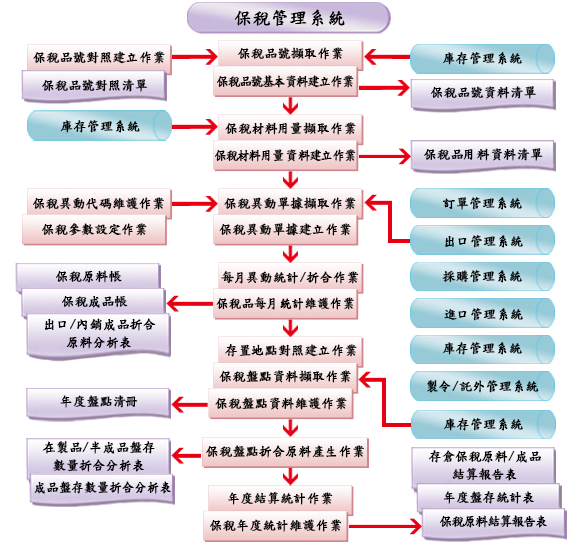
<style>
.page{position:relative;width:577px;height:545px;background:#ffffff}
.page>*{position:absolute;margin:0}
.t1{font:17.7px "DFKaiShu-SB-Estd-BF";color:#000000;font-weight:bold}
.t2{font:13px "DFKaiShu-SB-Estd-BF";color:#000000;font-weight:bold}
.t3{font:13px "DFKaiShu-SB-Estd-BF";letter-spacing:-0.1em;color:#000000;font-weight:bold;scale:0.95 1}
.t4{font:13px "DFKaiShu-SB-Estd-BF";letter-spacing:-0.15em;color:#000000;font-weight:bold}
.t5{font:13px "DFKaiShu-SB-Estd-BF";letter-spacing:0.03em;color:#000000;font-weight:bold}
.t6{font:13px "DFKaiShu-SB-Estd-BF";letter-spacing:0.01em;color:#000000;font-weight:bold;scale:0.95 1}
.t7{font:13px "DFKaiShu-SB-Estd-BF";letter-spacing:-0.17em;color:#000000;font-weight:bold;scale:0.95 1}
.t8{font:13px "DFKaiShu-SB-Estd-BF";letter-spacing:0.04em;color:#000000;font-weight:bold;scale:0.95 1}
.t9{font:13px "DFKaiShu-SB-Estd-BF";color:#000000;font-weight:bold;scale:0.95 1}
.t10{font:13px/18.1px "DFKaiShu-SB-Estd-BF";color:#000000;font-weight:bold}
.t11{font:13px "DFKaiShu-SB-Estd-BF";letter-spacing:-0.1em;color:#000000;font-weight:bold}
</style>
<div class="page">
<p class="t1" style="left:234px;top:9px;width:111px;height:17px">保稅管理系統</p>
<p class="t2" style="left:33px;top:51px;width:132px;height:13px">保稅品號對照建立作業</p>
<p class="t2" style="left:238px;top:47px;width:105px;height:13px">保稅品號擷取作業</p>
<p class="t2" style="left:442px;top:52px;width:80px;height:13px">庫存管理系統</p>
<p class="t3" style="left:217px;top:75px;width:137px;height:13px">保稅品號基本資料建立作業</p>
<p class="t2" style="left:42px;top:79px;width:106px;height:13px">保稅品號對照清單</p>
<p class="t2" style="left:431px;top:86px;width:105px;height:13px">保稅品號資料清單</p>
<p class="t2" style="left:60px;top:120px;width:80px;height:13px">庫存管理系統</p>
<p class="t2" style="left:225px;top:122px;width:131px;height:13px">保稅材料<span class="t4">用</span><span class="t5">量擷</span>取作業</p>
<p class="t3" style="left:215px;top:149px;width:141px;height:13px">保稅材<span class="t6">料</span><span class="t7">用</span><span class="t8">量資</span>料建立作業</p>
<p class="t2" style="left:424px;top:148px;width:119px;height:13px">保稅品用料資料清單</p>
<p class="t2" style="left:33px;top:197px;width:131px;height:13px">保稅異動代碼維護作業</p>
<p class="t2" style="left:224px;top:197px;width:132px;height:13px">保稅異動單據擷取作業</p>
<p class="t2" style="left:442px;top:197px;width:80px;height:13px">訂單管理系統</p>
<p class="t2" style="left:42px;top:223px;width:105px;height:13px">保稅參數設定作業</p>
<p class="t2" style="left:219px;top:223px;width:132px;height:13px">保稅異動單據建立作業</p>
<p class="t2" style="left:445px;top:235px;width:78px;height:13px">出口管理系統</p>
<p class="t2" style="left:56px;top:270px;width:66px;height:13px">保稅原料帳</p>
<p class="t2" style="left:442px;top:270px;width:80px;height:13px">採購管理系統</p>
<p class="t2" style="left:221px;top:271px;width:138px;height:13px">每<span class="t4">月</span><span class="t5">異動</span>統計/折合作業</p>
<p class="t2" style="left:62px;top:295px;width:66px;height:13px">保稅成品帳</p>
<p class="t9" style="left:216px;top:297px;width:138px;height:13px">保稅品每月統計維護作業</p>
<p class="t10" style="left:45px;top:318px;width:111px;height:31px;text-align:center">出口/內銷成品折合<br>原料分析表</p>
<p class="t2" style="left:444px;top:308px;width:79px;height:13px">進口管理系統</p>
<p class="t2" style="left:442px;top:342px;width:80px;height:13px">庫存管理系統</p>
<p class="t2" style="left:225px;top:344px;width:132px;height:13px">存置地點對照建立作業</p>
<p class="t2" style="left:219px;top:370px;width:132px;height:13px">保稅盤點資料擷取作業</p>
<p class="t2" style="left:426px;top:380px;width:113px;height:13px">製令/託外管理系統</p>
<p class="t2" style="left:60px;top:395px;width:78px;height:13px">年度盤點清冊</p>
<p class="t2" style="left:215px;top:397px;width:132px;height:13px">保稅盤點資料維護作業</p>
<p class="t2" style="left:443px;top:418px;width:80px;height:13px">庫存管理系統</p>
<p class="t10" style="left:43px;top:441px;width:112px;height:31px;text-align:center">在製品/半成品盤存<br>數量折合分析表</p>
<p class="t2" style="left:206px;top:445px;width:158px;height:13px">保稅盤點折合原料產生作業</p>
<p class="t10" style="left:429px;top:450px;width:112px;height:31px;text-align:center">存倉保稅原料/成品<br>結算報告表</p>
<p class="t9" style="left:34px;top:481px;width:137px;height:13px">成品盤存數量折合分析表</p>
<p class="t2" style="left:228px;top:491px;width:105px;height:14px">年度結算統計作業</p>
<p class="t2" style="left:443px;top:491px;width:91px;height:13px">年度盤存統計表</p>
<p class="t2" style="left:210px;top:519px;width:132px;height:13px">保稅年度統計維護作業</p>
<p class="t11" style="left:440px;top:514px;width:107px;height:14px">保稅原料結算報告表</p>
</div>
